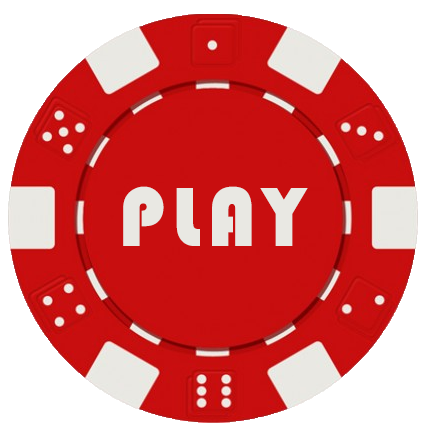
<style>
.page{position:relative;width:434px;height:434px;background:#ffffff}
.page>*{position:absolute;margin:0}
.t1{font:86.7px "Bauhaus93";letter-spacing:0.1em;color:#e9e8e3;scale:0.93 1}
</style>
<div class="page">
<p class="t1" style="left:123px;top:186px;width:185px;height:60px">PLAY</p>
</div>
